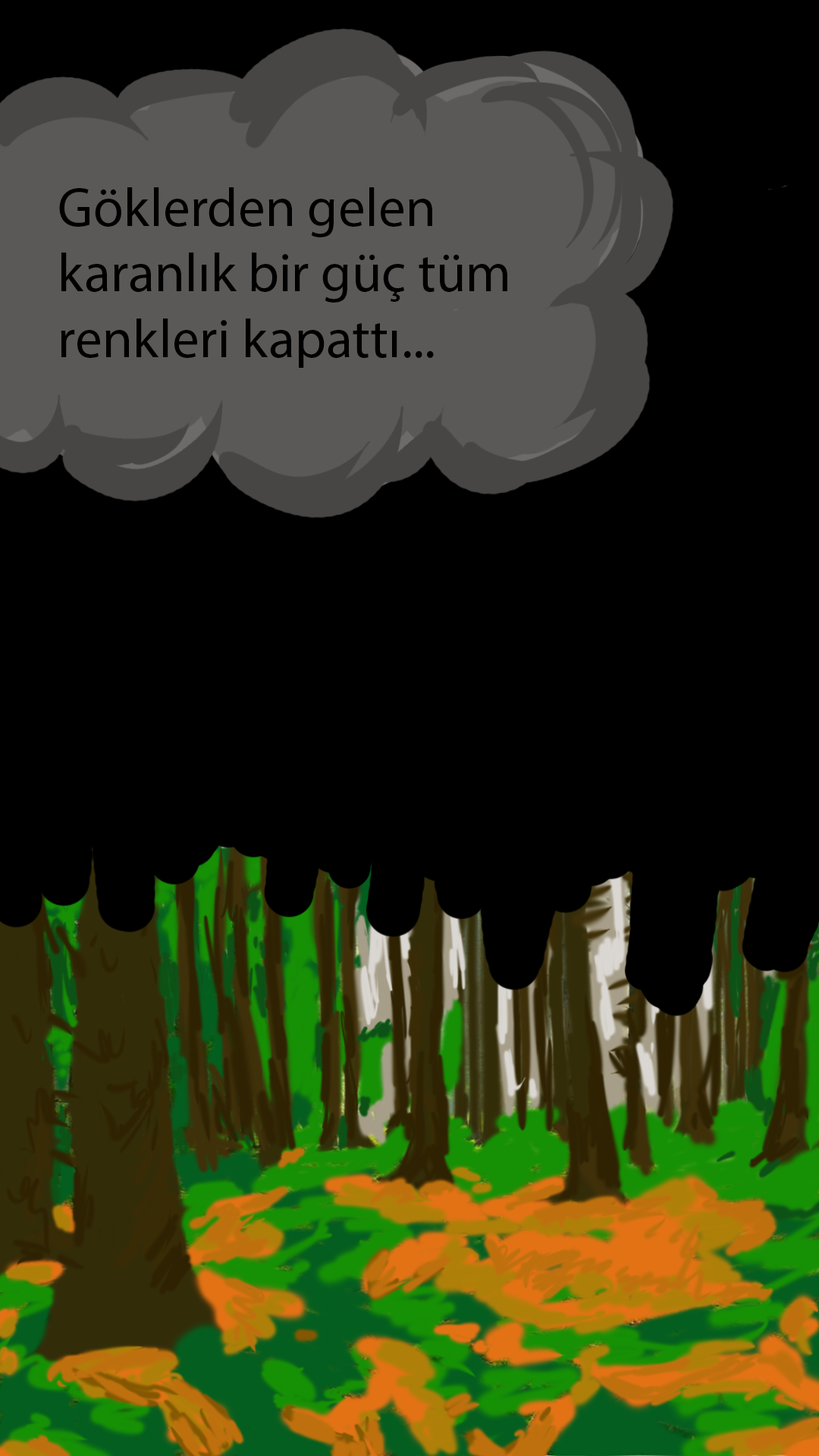
<style>
.page{position:relative;width:819px;height:1456px;background:#000000}
.page>*{position:absolute;margin:0}
.t1{font:54.6px "MyriadPro-Regular";color:#000000}
</style>
<div class="page">
<p class="t1" style="left:59px;top:187px;width:448px;height:181px">Göklerden gelen karanlık bir güç tüm renkleri kapattı...</p>
</div>
